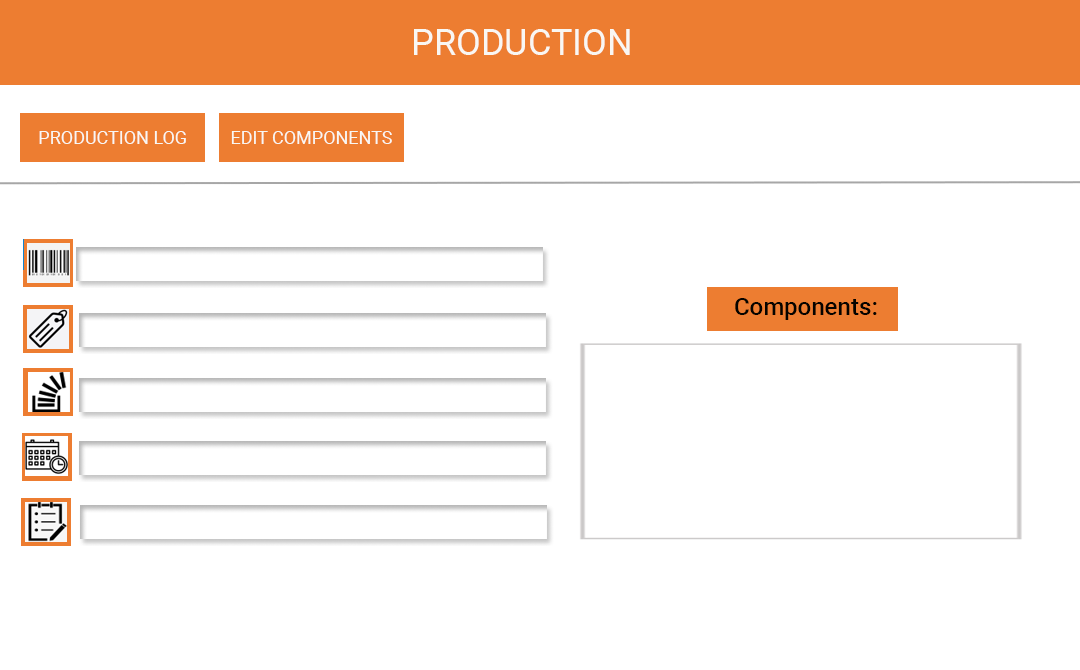
<style>
.page{position:relative;width:1080px;height:670px;background:#ffffff}
.page>*{position:absolute;margin:0}
.t1{font:36px "Roboto-Regular";color:#f9f7f3}
.t2{font:18px "Roboto-Regular";color:#f9f7f3}
.t3{font:14px "Roboto-Regular";color:#f9f7f3}
.t4{font:24px "Roboto-Medium";color:#050300}
</style>
<div class="page">
<p class="t1" style="left:414px;top:29px;width:216px;height:26px">PRODUCTION</p>
<p class="t2" style="left:39px;top:131px;width:147px;height:13px"><span class="t3">     </span>PRODUCTION LOG</p>
<p class="t2" style="left:231px;top:131px;width:161px;height:13px">EDIT COMPONENTS</p>
<p class="t4" style="left:735px;top:298px;width:142px;height:22px">Components:</p>
</div>
